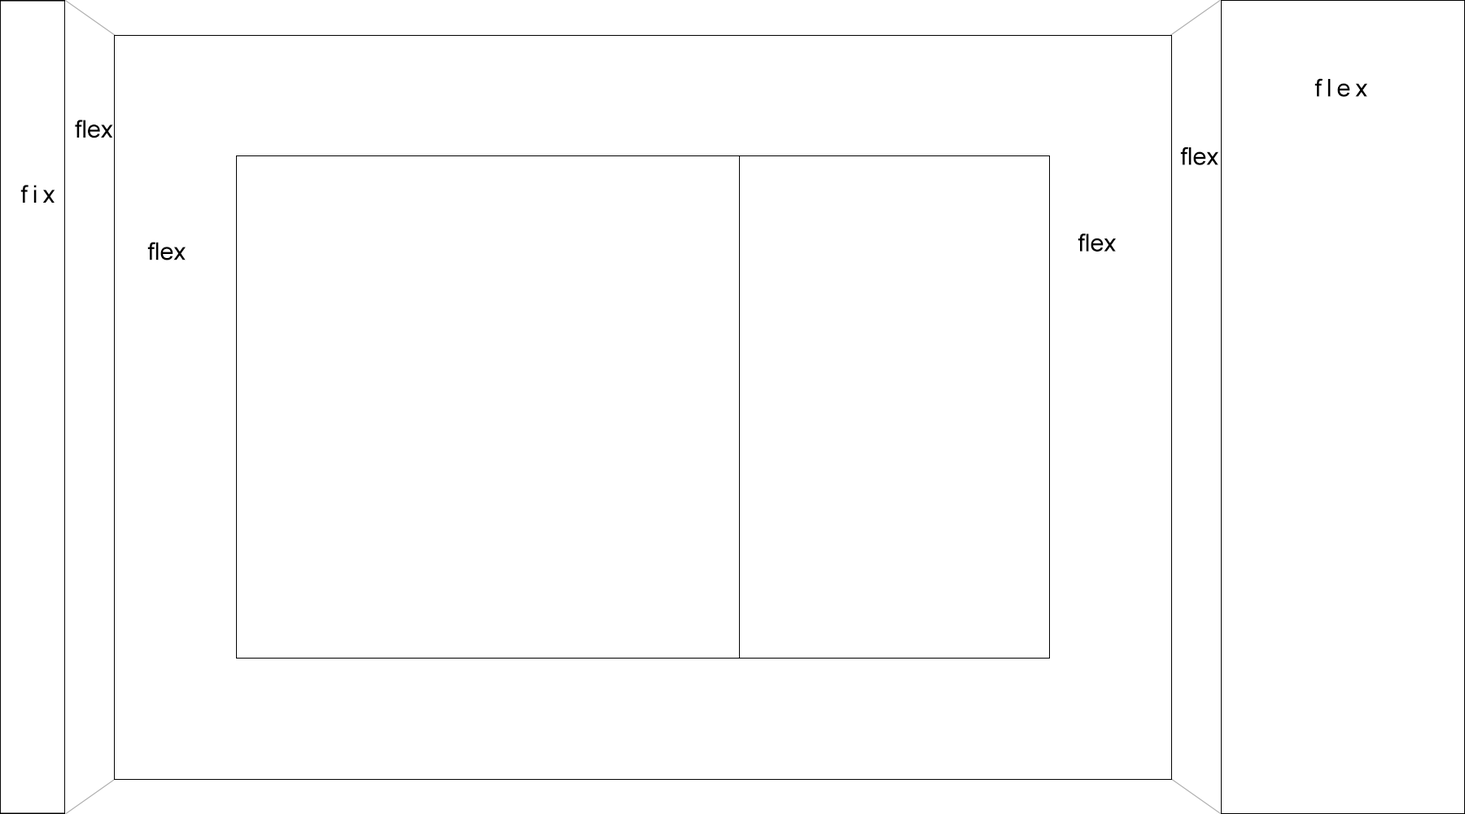
<style>
.page{position:relative;width:1465px;height:814px;background:#ffffff}
.page>*{position:absolute;margin:0}
.t1{font:24.4px "ArialMT";letter-spacing:0.2em;color:#000000}
.t2{font:24.4px "ArialMT";color:#000000}
</style>
<div class="page">
<p class="t1" style="left:1314px;top:78px;width:53px;height:19px">flex</p>
<p class="t2" style="left:75px;top:120px;width:38px;height:18px">flex</p>
<p class="t2" style="left:1180px;top:147px;width:38px;height:18px">flex</p>
<p class="t1" style="left:20px;top:185px;width:35px;height:18px">fix</p>
<p class="t2" style="left:1078px;top:234px;width:38px;height:18px">flex</p>
<p class="t2" style="left:147px;top:242px;width:39px;height:18px">flex</p>
</div>
